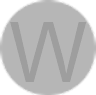
<style>
.page{position:relative;width:96px;height:95px;background:#b6b6b6}
.page>*{position:absolute;margin:0}
.t1{font:83.3px "ArialMT";color:#9e9e9e}
</style>
<div class="page">
<p class="t1" style="left:10px;top:22px;width:77px;height:60px">W</p>
</div>
